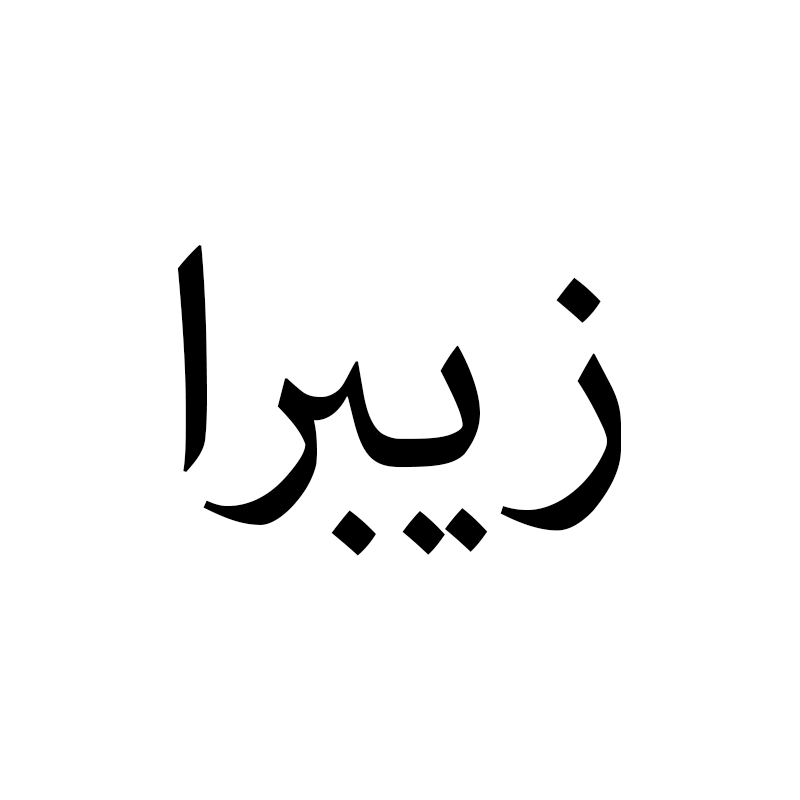
<style>
.page{position:relative;width:800px;height:800px;background:#ffffff}
.page>*{position:absolute;margin:0}
.t1{font:450px "AdobeArabic-Regular";color:#000000}
</style>
<div class="page">
<p class="t1" style="left:177px;top:245px;width:444px;height:311px">زیبرا</p>
</div>
